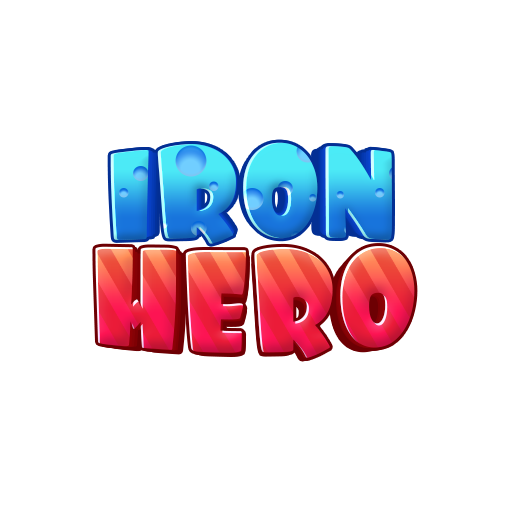
<style>
.page{position:relative;width:512px;height:512px;background:#ffffff}
.page>*{position:absolute;margin:0}
.t1{font:125px "Foo-Regular";letter-spacing:-0.01em}
.t2{font:122.5px "Foo-Regular";letter-spacing:-0.01em}
.t3{font:120.1px "Foo-Regular";letter-spacing:-0.01em}
.t4{font:117.6px "Foo-Regular";letter-spacing:-0.01em}
.t5{font:115.3px "Foo-Regular";letter-spacing:-0.01em}
.t6{font:137.5px "Foo-Regular";letter-spacing:-0.005em;scale:0.91 1}
.t7{font:134.8px "Foo-Regular";letter-spacing:-0.005em;scale:0.91 1}
.t8{font:132.1px "Foo-Regular";letter-spacing:-0.005em;scale:0.91 1}
.t9{font:129.4px "Foo-Regular";letter-spacing:-0.005em;scale:0.91 1}
.t10{font:124.3px "Foo-Regular";letter-spacing:-0.005em;scale:0.91 1}
</style>
<div class="page">
<p class="t1" style="left:110px;top:142px;width:282px;height:102px">IRON</p>
<p class="t2" style="left:113px;top:142px;width:277px;height:100px">IRON</p>
<p class="t3" style="left:116px;top:143px;width:271px;height:98px">IRON</p>
<p class="t4" style="left:118px;top:145px;width:266px;height:96px">IRON</p>
<p class="t5" style="left:121px;top:145px;width:261px;height:94px">IRON</p>
<p class="t6" style="left:95px;top:246px;width:320px;height:112px">HERO</p>
<p class="t7" style="left:98px;top:248px;width:314px;height:110px">HERO</p>
<p class="t8" style="left:101px;top:250px;width:307px;height:108px">HERO</p>
<p class="t9" style="left:105px;top:252px;width:301px;height:106px">HERO</p>
<p class="t10" style="left:110px;top:257px;width:289px;height:102px">HERO</p>
</div>
